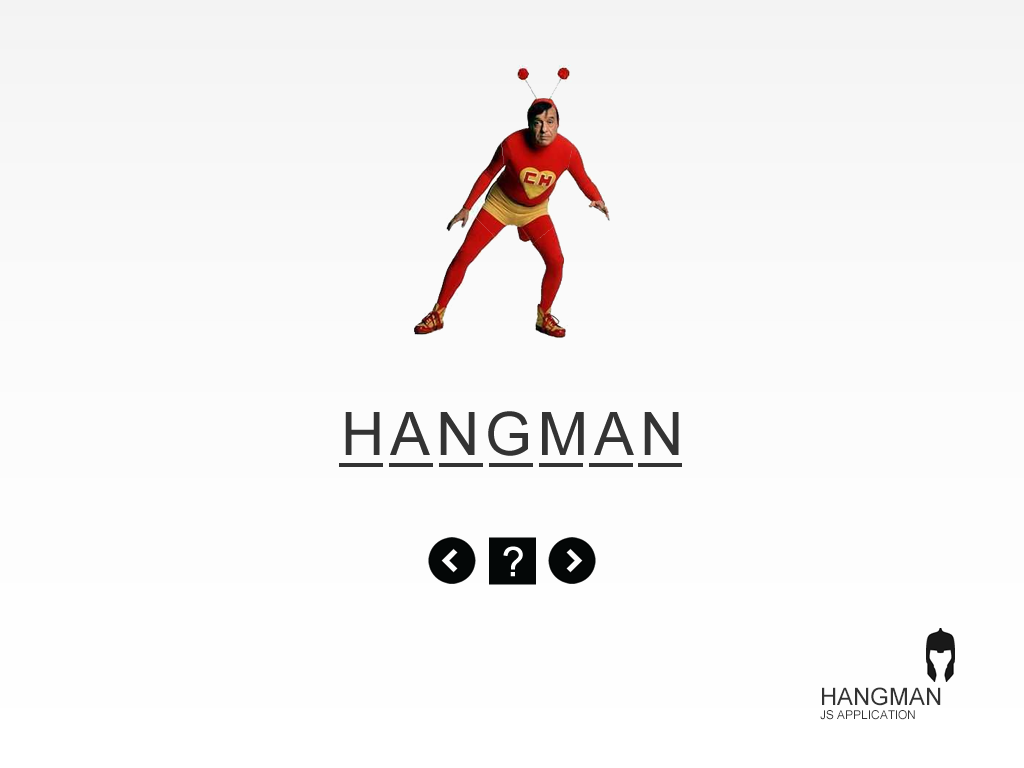
<style>
.page{position:relative;width:1024px;height:768px}
.page>*{position:absolute;margin:0}
.t1{font:24px "ArialMT";color:#333333}
.t2{font:12px "ArialMT";color:#333333}
</style>
<div class="page">
<p class="t1" style="left:822px;top:687px;width:119px;height:19px">HANGMAN</p>
<p class="t2" style="left:820px;top:710px;width:95px;height:10px">JS APPLICATION</p>
</div>
